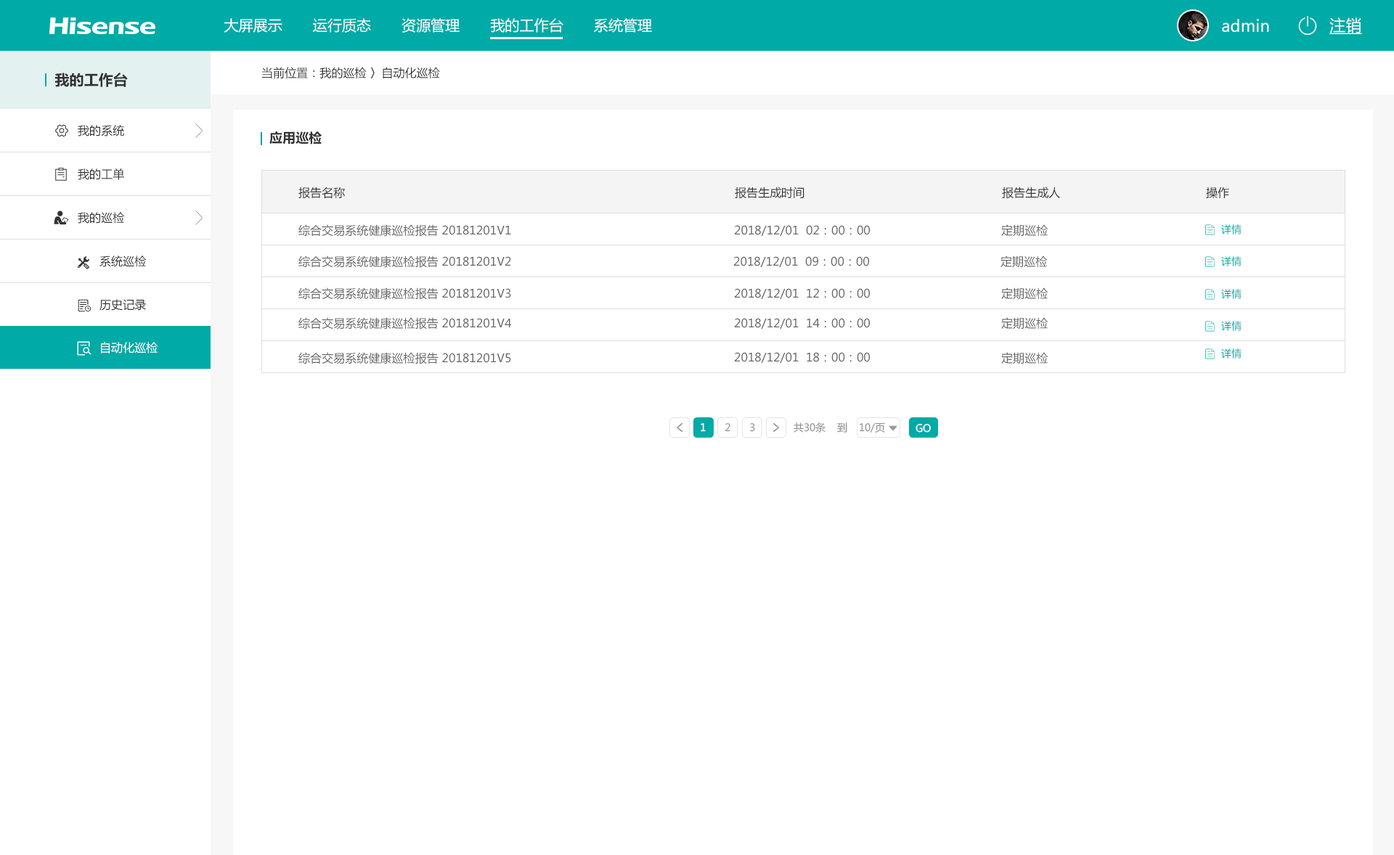
<style>
.page{position:relative;width:1394px;height:855px;background:#ffffff}
.page>*{position:absolute;margin:0}
.t1{font:16px "MicrosoftYaHei";letter-spacing:0.004em;color:#ffffff;text-decoration:underline}
.t2{font:14.5px "MicrosoftYaHei";letter-spacing:0.004em;color:#ffffff}
.t3{font:16px "MicrosoftYaHei";letter-spacing:0.004em;color:#ffffff}
.t4{font:14.5px "MicrosoftYaHei-Bold";letter-spacing:0.004em;color:#333333}
.t5{font:11.6px "MicrosoftYaHei";letter-spacing:0.004em;color:#333333}
.t6{font:13.1px "MicrosoftYaHei-Bold";letter-spacing:0.004em;color:#333333}
.t7{font:11.6px "MicrosoftYaHei";letter-spacing:0.004em;color:#666666}
.t8{font:10.2px "MicrosoftYaHei";letter-spacing:0.004em;color:#00aaa6}
.t9{font:11.6px "MicrosoftYaHei";letter-spacing:0.004em;color:#ffffff}
.t10{font:10.2px "MicrosoftYaHei";color:#ffffff}
.t11{font:10.2px "MicrosoftYaHei";color:#999999}
</style>
<div class="page">
<p class="t1" style="left:1329px;top:17px;width:33px;height:17px">注销</p>
<p class="t2" style="left:224px;top:18px;width:428px;height:15px">大屏展示       运行质态       资源管理       我的工作台       系统管理</p>
<p class="t3" style="left:1222px;top:19px;width:47px;height:13px">admin</p>
<p class="t4" style="left:54px;top:73px;width:74px;height:14px">我的工作台</p>
<p class="t5" style="left:261px;top:67px;width:179px;height:12px">当前位置：我的巡检 〉自动化巡检</p>
<p class="t5" style="left:78px;top:125px;width:46px;height:12px">我的系统</p>
<p class="t6" style="left:269px;top:131px;width:53px;height:13px">应用巡检</p>
<p class="t5" style="left:78px;top:168px;width:46px;height:12px">我的工单</p>
<p class="t5" style="left:298px;top:187px;width:47px;height:12px">报告名称</p>
<p class="t5" style="left:735px;top:187px;width:70px;height:12px">报告生成时间</p>
<p class="t5" style="left:1002px;top:187px;width:58px;height:12px">报告生成人</p>
<p class="t5" style="left:1206px;top:187px;width:23px;height:12px">操作</p>
<p class="t5" style="left:78px;top:212px;width:47px;height:12px">我的巡检</p>
<p class="t7" style="left:298px;top:224px;width:213px;height:13px">综合交易系统健康巡检报告 20181201V1</p>
<p class="t7" style="left:734px;top:225px;width:136px;height:11px">2018/12/01  02：00：00</p>
<p class="t7" style="left:1001px;top:224px;width:47px;height:13px">定期巡检</p>
<p class="t8" style="left:1221px;top:224px;width:21px;height:11px">详情</p>
<p class="t5" style="left:99px;top:256px;width:48px;height:11px">系统巡检</p>
<p class="t7" style="left:298px;top:256px;width:213px;height:12px">综合交易系统健康巡检报告 20181201V2</p>
<p class="t7" style="left:733px;top:256px;width:136px;height:11px">2018/12/01  09：00：00</p>
<p class="t7" style="left:1001px;top:256px;width:47px;height:12px">定期巡检</p>
<p class="t8" style="left:1221px;top:256px;width:21px;height:10px">详情</p>
<p class="t7" style="left:298px;top:288px;width:213px;height:12px">综合交易系统健康巡检报告 20181201V3</p>
<p class="t7" style="left:734px;top:288px;width:136px;height:11px">2018/12/01  12：00：00</p>
<p class="t7" style="left:1001px;top:288px;width:47px;height:12px">定期巡检</p>
<p class="t8" style="left:1221px;top:289px;width:21px;height:10px">详情</p>
<p class="t5" style="left:99px;top:299px;width:47px;height:12px">历史记录</p>
<p class="t7" style="left:298px;top:317px;width:213px;height:13px">综合交易系统健康巡检报告 20181201V4</p>
<p class="t7" style="left:1001px;top:317px;width:47px;height:13px">定期巡检</p>
<p class="t7" style="left:734px;top:318px;width:136px;height:11px">2018/12/01  14：00：00</p>
<p class="t8" style="left:1221px;top:321px;width:21px;height:10px">详情</p>
<p class="t9" style="left:101px;top:342px;width:57px;height:12px">自动化巡检</p>
<p class="t7" style="left:298px;top:352px;width:213px;height:12px">综合交易系统健康巡检报告 20181201V5</p>
<p class="t7" style="left:734px;top:352px;width:136px;height:11px">2018/12/01  18：00：00</p>
<p class="t7" style="left:1001px;top:352px;width:47px;height:12px">定期巡检</p>
<p class="t8" style="left:1221px;top:349px;width:21px;height:10px">详情</p>
<p class="t10" style="left:701px;top:423px;width:5px;height:9px">1</p>
<p class="t11" style="left:725px;top:423px;width:5px;height:9px">2</p>
<p class="t11" style="left:750px;top:423px;width:5px;height:9px">3</p>
<p class="t11" style="left:794px;top:423px;width:91px;height:10px">共30条    到    10/页</p>
<p class="t10" style="left:916px;top:424px;width:15px;height:9px">GO</p>
</div>
